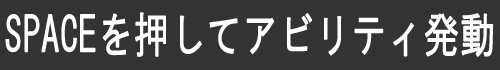
<style>
.page{position:relative;width:500px;height:70px;background:#333333}
.page>*{position:absolute;margin:0}
.t1{font:48px "HGGothicM";color:#ffffff;font-weight:bold;scale:0.74 1}
</style>
<div class="page">
<p class="t1" style="left:5px;top:12px;width:489px;height:45px">SPACEを押してアビリティ発動</p>
</div>
